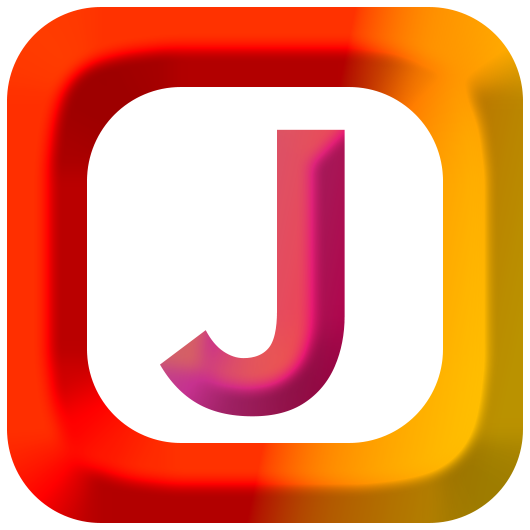
<style>
.page{position:relative;width:530px;height:530px;background:#ffffff}
.page>*{position:absolute;margin:0}
.t1{font:377.4px "NotoSansSC-Black"}
</style>
<div class="page">
<p class="t1" style="left:160px;top:129px;width:185px;height:288px">J</p>
</div>
